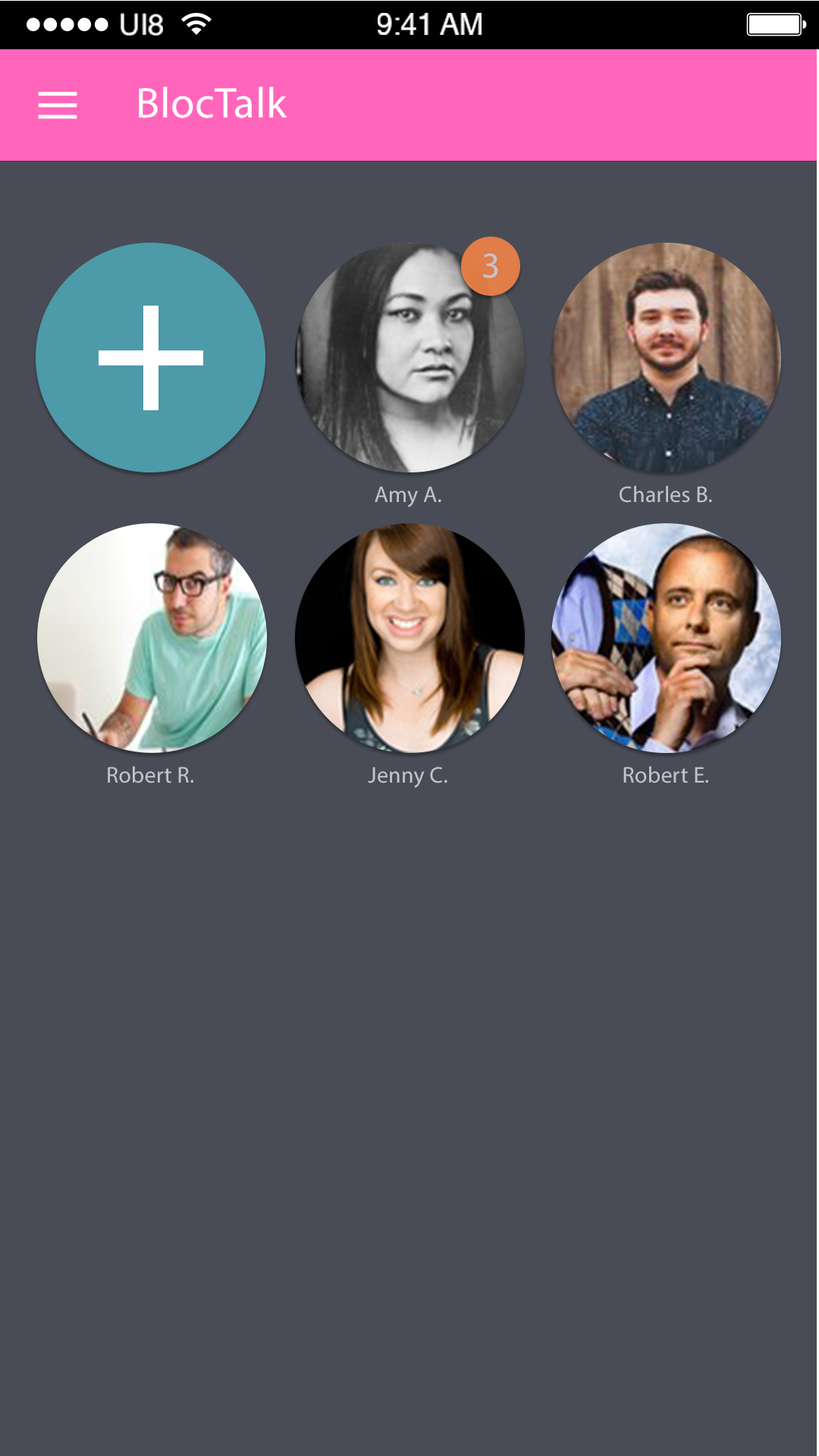
<style>
.page{position:relative;width:819px;height:1456px;background:#494c56}
.page>*{position:absolute;margin:0}
.t1{font:29.1px "Helvetica";color:#ffffff}
.t2{font:43.4px "MyriadPro-Regular";letter-spacing:0.01em;color:#ffffff}
.t3{font:36.4px "MyriadPro-Regular";letter-spacing:0.01em;color:#c0c3cd}
.t4{font:22.7px "MyriadPro-Regular";letter-spacing:0.01em;color:#c0c3cd}
</style>
<div class="page">
<p class="t1" style="left:121px;top:13px;width:42px;height:23px">UI8</p>
<p class="t1" style="left:378px;top:13px;width:104px;height:22px">9:41 AM</p>
<p class="t2" style="left:139px;top:86px;width:148px;height:32px">BlocTalk</p>
<p class="t3" style="left:483px;top:253px;width:15px;height:25px">3</p>
<p class="t4" style="left:620px;top:485px;width:92px;height:18px">Charles B.</p>
<p class="t4" style="left:375px;top:486px;width:66px;height:21px">Amy A.</p>
<p class="t4" style="left:108px;top:766px;width:85px;height:17px">Robert R.</p>
<p class="t4" style="left:368px;top:767px;width:79px;height:21px">Jenny C.</p>
<p class="t4" style="left:623px;top:766px;width:85px;height:17px">Robert E.</p>
</div>
